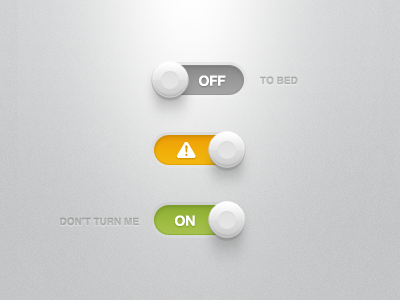
<style>
.page{position:relative;width:400px;height:300px}
.page>*{position:absolute;margin:0}
.t1{font:14px "HelveticaNeueLTStd-Bd";letter-spacing:-0.015em;color:#ffffff;text-transform:uppercase}
.t2{font:10px "Helvetica-Bold";color:#b6b6b6;text-transform:uppercase}
.t3{font:10px "Helvetica-Bold";color:#b0b0b1;text-transform:uppercase}
</style>
<div class="page">
<p class="t1" style="left:199px;top:75px;width:27px;height:11px">OFF</p>
<p class="t2" style="left:260px;top:76px;width:38px;height:9px">to bed</p>
<p class="t3" style="left:60px;top:217px;width:79px;height:9px">don’t turn me</p>
<p class="t1" style="left:175px;top:215px;width:20px;height:11px">On</p>
</div>
